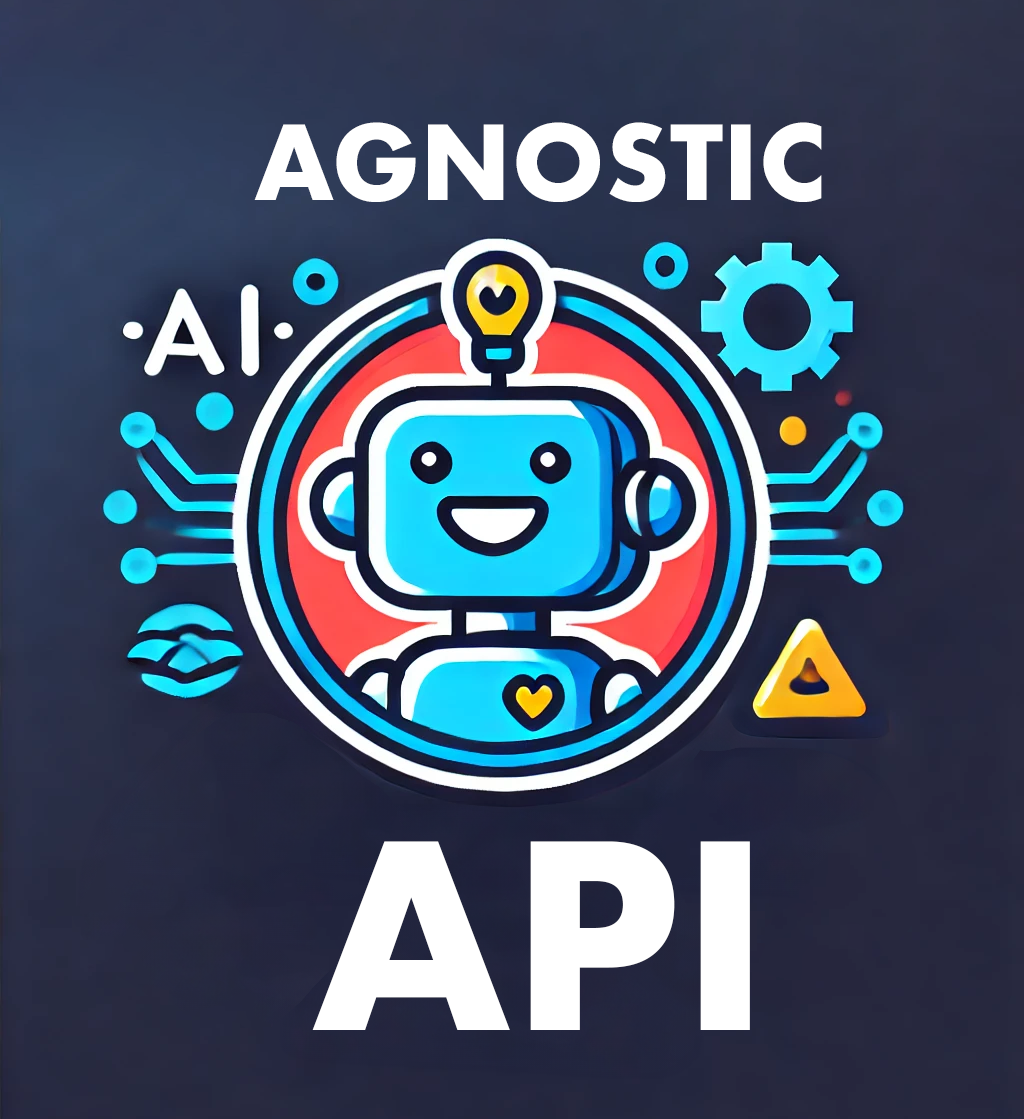
<style>
.page{position:relative;width:1024px;height:1119px}
.page>*{position:absolute;margin:0}
.t1{font:100px "Futura-Bold";color:#ffffff}
.t2{font:250px/230px "Futura-Bold";color:#ffffff}
</style>
<div class="page">
<p class="t1" style="left:254px;top:122px;width:568px;height:908px;text-align:center">AGNOSTIC<br><br><br><br><br><br><span class="t2">API</span></p>
</div>
